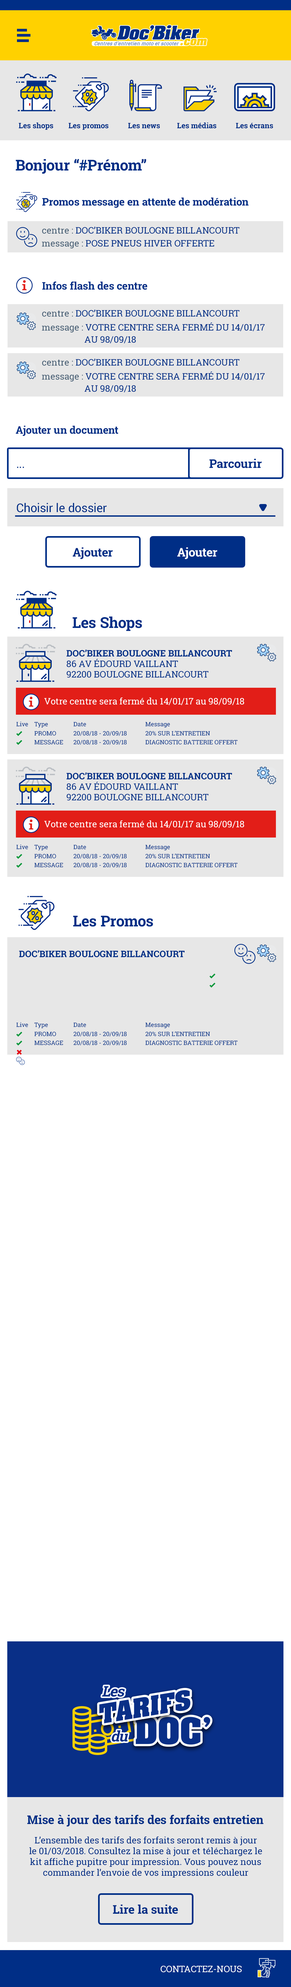
<style>
.page{position:relative;width:291px;height:1987px;background:#ffffff}
.page>*{position:absolute;margin:0}
.t1{font:7.5px "RobotoSlab-Bold";color:#002e86}
.t2{font:15px "RobotoSlab-Bold";color:#002e86}
.t3{font:10.5px "RobotoSlab-Bold";color:#002e86}
.t4{font:9px "RobotoSlab-Regular";color:#002f87;text-transform:uppercase}
.t5{font:9px "RobotoSlab-Regular";color:#435b71}
.t6{font:9px/12px "RobotoSlab-Regular";color:#002f87;text-transform:uppercase}
.t7{font:9px/12px "RobotoSlab-Regular";color:#435b71}
.t8{font:12px "RobotoSlab-Bold";color:#002e86}
.t9{font:12px "Roboto-Regular";color:#002e86}
.t10{font:12px "RobotoSlab-Bold";color:#ffffff}
.t11{font:9px/10.5px "RobotoSlab-Regular";color:#002f87;text-transform:uppercase}
.t12{font:9px/10.5px "RobotoSlab-Bold";color:#002f87;text-transform:uppercase}
.t13{font:9px "RobotoSlab-Regular";color:#ffffff}
.t14{font:6px/9px "RobotoSlab-Regular";color:#002f87}
.t15{font:6px/9px "FoundationIconsGeneral-Reg";color:#00983a;text-transform:uppercase}
.t16{font:6px/9px "RobotoSlab-Regular";color:#002f87;text-transform:uppercase}
.t17{font:9px "RobotoSlab-Bold";color:#002f87;text-transform:uppercase}
.t18{font:6px/9px "FoundationIconsGeneral-Reg";color:#e30613;text-transform:uppercase}
.t19{font:9px "RobotoSlab-Regular";color:#002e86}
.t20{font:9px "RobotoSlab-Regular";color:#ffffff;text-transform:uppercase}
</style>
<div class="page">
<p class="t1" style="left:19px;top:122px;width:34px;height:8px">Les shops</p>
<p class="t1" style="left:68px;top:123px;width:41px;height:7px">Les promos</p>
<p class="t1" style="left:128px;top:123px;width:32px;height:5px">Les news</p>
<p class="t1" style="left:177px;top:122px;width:39px;height:6px">Les médias</p>
<p class="t1" style="left:236px;top:123px;width:37px;height:5px">Les écrans</p>
<p class="t2" style="left:16px;top:159px;width:130px;height:15px">Bonjour “#Prénom”</p>
<p class="t3" style="left:42px;top:197px;width:207px;height:11px">Promos message en attente de modération</p>
<p class="t4" style="left:42px;top:227px;width:197px;height:7px"><span class="t5">centre : </span>Doc’Biker Boulogne billancourt</p>
<p class="t4" style="left:42px;top:240px;width:172px;height:8px"><span class="t5">message : </span>pose pneus hiver offerte</p>
<p class="t3" style="left:42px;top:281px;width:105px;height:9px">Infos flash des centre</p>
<p class="t4" style="left:42px;top:309px;width:197px;height:8px"><span class="t5">centre : </span>Doc’Biker Boulogne billancourt</p>
<p class="t6" style="left:42px;top:322px;width:223px;height:21px"><span class="t7">message : </span>votre centre sera fermé du 14/01/17<br>                   au 98/09/18</p>
<p class="t4" style="left:42px;top:358px;width:197px;height:8px"><span class="t5">centre : </span>Doc’Biker Boulogne billancourt</p>
<p class="t6" style="left:42px;top:371px;width:223px;height:21px"><span class="t7">message : </span>votre centre sera fermé du 14/01/17<br>                   au 98/09/18</p>
<p class="t3" style="left:16px;top:426px;width:102px;height:10px">Ajouter un document</p>
<p class="t8" style="left:209px;top:459px;width:53px;height:9px">Parcourir</p>
<p class="t9" style="left:17px;top:466px;width:7px;height:2px">...</p>
<p class="t9" style="left:17px;top:503px;width:90px;height:9px">Choisir le dossier</p>
<p class="t8" style="left:73px;top:547px;width:40px;height:12px">Ajouter</p>
<p class="t10" style="left:177px;top:547px;width:40px;height:12px">Ajouter</p>
<p class="t2" style="left:72px;top:616px;width:70px;height:15px">Les Shops</p>
<p class="t11" style="left:67px;top:649px;width:165px;height:29px"><span class="t12">Doc’Biker Boulogne billancourt<br></span>86 av édourd vaillant <br>92200 boulogne billancourt</p>
<p class="t13" style="left:44px;top:697px;width:200px;height:8px">Votre centre sera fermé du 14/01/17 au 98/09/18</p>
<p class="t14" style="left:16px;top:722px;width:12px;height:23px">Live<br><span class="t15">f<br>f</span></p>
<p class="t16" style="left:34px;top:722px;width:29px;height:22px"><span class="t14">Type<br></span>PROMO<br>MESSAGE</p>
<p class="t16" style="left:74px;top:722px;width:53px;height:23px"><span class="t14">Date<br></span>20/08/18 - 20/09/18<br>20/08/18 - 20/09/18</p>
<p class="t16" style="left:145px;top:722px;width:93px;height:22px"><span class="t14">Message<br></span>20% sur l’entretien<br>Diagnostic batterie offert</p>
<p class="t11" style="left:67px;top:772px;width:165px;height:28px"><span class="t12">Doc’Biker Boulogne billancourt<br></span>86 av édourd vaillant <br>92200 boulogne billancourt</p>
<p class="t13" style="left:44px;top:820px;width:200px;height:8px">Votre centre sera fermé du 14/01/17 au 98/09/18</p>
<p class="t14" style="left:16px;top:844px;width:12px;height:24px">Live<br><span class="t15">f<br>f</span></p>
<p class="t16" style="left:34px;top:845px;width:29px;height:22px"><span class="t14">Type<br></span>PROMO<br>MESSAGE</p>
<p class="t16" style="left:74px;top:845px;width:53px;height:23px"><span class="t14">Date<br></span>20/08/18 - 20/09/18<br>20/08/18 - 20/09/18</p>
<p class="t16" style="left:145px;top:845px;width:93px;height:22px"><span class="t14">Message<br></span>20% sur l’entretien<br>Diagnostic batterie offert</p>
<p class="t2" style="left:73px;top:915px;width:80px;height:11px">Les Promos</p>
<p class="t17" style="left:19px;top:950px;width:165px;height:7px">Doc’Biker Boulogne billancourt</p>
<p class="t14" style="left:16px;top:1022px;width:12px;height:33px">Live<br><span class="t15">f<br>f<br></span><span class="t18">g</span></p>
<p class="t16" style="left:34px;top:1022px;width:29px;height:23px"><span class="t14">Type<br></span>PROMO<br>MESSAGE</p>
<p class="t16" style="left:74px;top:1022px;width:53px;height:23px"><span class="t14">Date<br></span>20/08/18 - 20/09/18<br>20/08/18 - 20/09/18</p>
<p class="t16" style="left:145px;top:1022px;width:93px;height:23px"><span class="t14">Message<br></span>20% sur l’entretien<br>Diagnostic batterie offert</p>
<p class="t8" style="left:27px;top:1814px;width:236px;height:12px">Mise à jour des tarifs des forfaits entretien</p>
<p class="t19" style="left:29px;top:1836px;width:233px;height:41px;text-align:center">L’ensemble des tarifs des forfaits seront remis à jour<br>le 01/03/2018. Consultez la mise à jour et téléchargez le kit affiche pupitre pour impression. Vous pouvez nous commander l’envoie de vos impressions couleur</p>
<p class="t8" style="left:113px;top:1904px;width:65px;height:10px">Lire la suite</p>
<p class="t20" style="left:161px;top:1965px;width:81px;height:7px">contactez-nous</p>
</div>
